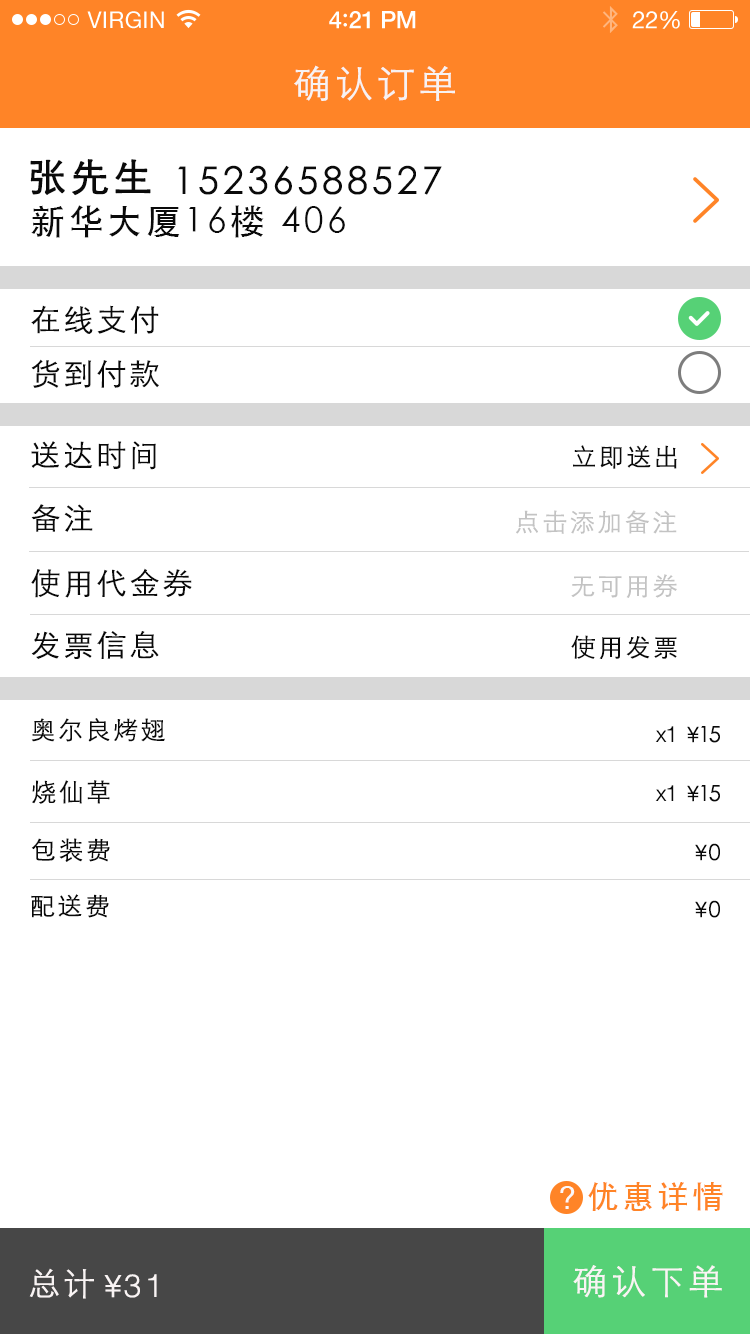
<style>
.page{position:relative;width:750px;height:1334px;background:#ffffff}
.page>*{position:absolute;margin:0}
.t1{font:23px "HelveticaNeue";letter-spacing:0.02em;color:#ffffff}
.t2{font:24px "HelveticaNeue-Medium";letter-spacing:-0.02em;color:#ffffff}
.t3{font:26px "Avenir-Medium";letter-spacing:-0.02em;color:#ffffff}
.t4{font:24px "HelveticaNeue";letter-spacing:-0.02em;color:#ffffff}
.t5{font:38px "STXihei";letter-spacing:0.1em;color:#f7f2f2}
.t6{font:38px "STXihei";letter-spacing:0.1em;color:#0a0a0a;font-weight:bold}
.t7{font:38px "STXihei";letter-spacing:0.1em;color:#0a0a0a}
.t8{font:35px "STHeiti";letter-spacing:0.1em;color:#0a0a0a}
.t9{font:30px "STXihei";letter-spacing:0.1em;color:#0a0a0a}
.t10{font:25px "STXihei";letter-spacing:0.1em;color:#0a0a0a}
.t11{font:25px "STXihei";letter-spacing:0.1em;color:#c3c3c3}
.t12{font:22px "Helvetica-Light";letter-spacing:-0.075em;color:#0a0a0a}
.t13{font:22px "STXihei";letter-spacing:-0.075em;color:#0a0a0a}
.t14{font:32px "STHeiti";letter-spacing:0.1em;color:#ff8427}
.t15{font:31.5px "STHeiti";letter-spacing:0.1em;color:#fbf8f8}
.t16{font:35px "STXihei";letter-spacing:0.1em;color:#f9f4f4}
.t17{font:32px "STXihei";letter-spacing:0.1em;color:#f9f4f4}
.t18{font:32px "Helvetica-Light";letter-spacing:0.1em;color:#f9f4f4}
</style>
<div class="page">
<p class="t1" style="left:87px;top:11px;width:77px;height:18px">VIRGIN</p>
<p class="t2" style="left:329px;top:11px;width:87px;height:18px">4<span class="t3">:</span>21 PM</p>
<p class="t4" style="left:632px;top:11px;width:48px;height:18px">22%</p>
<p class="t5" style="left:294px;top:65px;width:161px;height:36px">确认订单</p>
<p class="t6" style="left:30px;top:159px;width:121px;height:37px">张先生</p>
<p class="t7" style="left:178px;top:165px;width:264px;height:30px">15236588527</p>
<p class="t8" style="left:31px;top:205px;width:314px;height:33px">新华大厦16楼 406</p>
<p class="t9" style="left:31px;top:305px;width:128px;height:29px">在线支付</p>
<p class="t9" style="left:31px;top:359px;width:128px;height:29px">货到付款</p>
<p class="t9" style="left:31px;top:441px;width:125px;height:29px">送达时间</p>
<p class="t10" style="left:573px;top:445px;width:104px;height:24px">立即送出</p>
<p class="t9" style="left:31px;top:504px;width:62px;height:28px">备注</p>
<p class="t11" style="left:516px;top:510px;width:161px;height:24px">点击添加备注</p>
<p class="t9" style="left:31px;top:568px;width:161px;height:30px">使用代金券</p>
<p class="t11" style="left:571px;top:574px;width:106px;height:24px">无可用券</p>
<p class="t9" style="left:31px;top:631px;width:128px;height:28px">发票信息</p>
<p class="t10" style="left:571px;top:635px;width:106px;height:24px">使用发票</p>
<p class="t10" style="left:31px;top:718px;width:134px;height:24px">奥尔良烤翅</p>
<p class="t12" style="left:655px;top:726px;width:19px;height:16px">x1</p>
<p class="t13" style="left:687px;top:726px;width:12px;height:17px">￥</p>
<p class="t13" style="left:701px;top:726px;width:19px;height:17px">15</p>
<p class="t10" style="left:32px;top:780px;width:78px;height:24px">烧仙草</p>
<p class="t12" style="left:655px;top:785px;width:19px;height:16px">x1</p>
<p class="t13" style="left:687px;top:785px;width:12px;height:17px">￥</p>
<p class="t13" style="left:701px;top:785px;width:19px;height:17px">15</p>
<p class="t10" style="left:31px;top:838px;width:79px;height:24px">包装费</p>
<p class="t13" style="left:695px;top:844px;width:12px;height:17px">￥</p>
<p class="t13" style="left:709px;top:843px;width:11px;height:18px">0</p>
<p class="t10" style="left:31px;top:894px;width:78px;height:24px">配送费</p>
<p class="t13" style="left:695px;top:901px;width:12px;height:17px">￥</p>
<p class="t13" style="left:709px;top:900px;width:11px;height:18px">0</p>
<p class="t14" style="left:588px;top:1182px;width:135px;height:29px">优惠详情</p>
<p class="t15" style="left:560px;top:1186px;width:15px;height:23px">？</p>
<p class="t16" style="left:573px;top:1265px;width:149px;height:33px">确认下单</p>
<p class="t17" style="left:29px;top:1268px;width:65px;height:31px">总计</p>
<p class="t17" style="left:104px;top:1275px;width:18px;height:23px">￥</p>
<p class="t18" style="left:124px;top:1274px;width:33px;height:24px">31</p>
</div>
